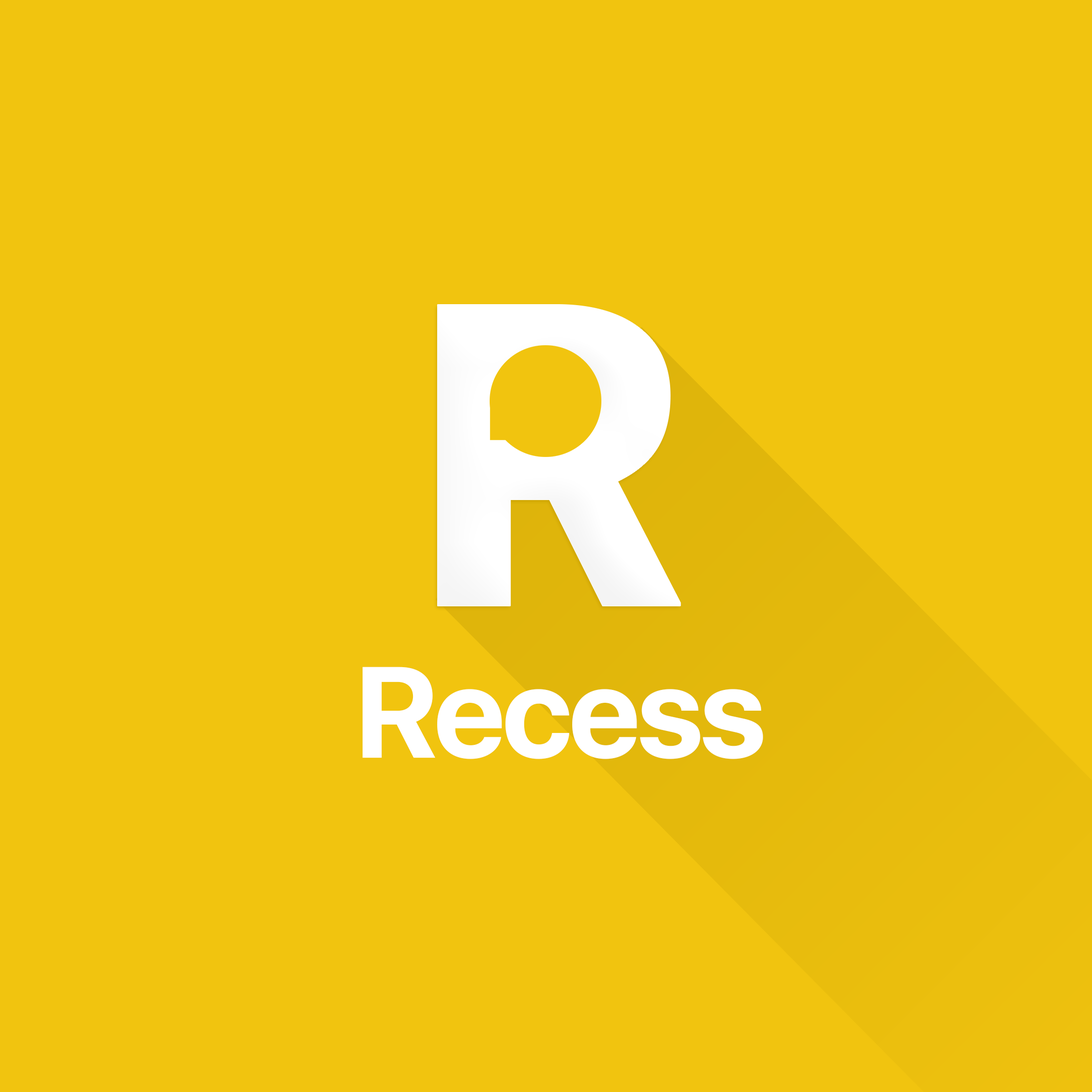
<style>
.page{position:relative;width:1092px;height:1092px;background:#f1c40f}
.page>*{position:absolute;margin:0}
.t1{font:423.1px "Roboto-Black";letter-spacing:-0.075em;color:#ffffff}
.t2{font:128.6px "SFUIDisplay-Bold";letter-spacing:-0.025em;color:#ffffff}
</style>
<div class="page">
<p class="t1" style="left:437px;top:305px;width:244px;height:301px">R</p>
<p class="t2" style="left:363px;top:667px;width:400px;height:92px">Recess</p>
</div>
